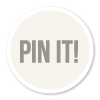
<style>
.page{position:relative;width:100px;height:100px;background:#ffffff}
.page>*{position:absolute;margin:0}
.t1{font:31.9px "BebasNeue";color:#96958e;text-transform:uppercase}
</style>
<div class="page">
<p class="t1" style="left:20px;top:40px;width:58px;height:23px">pin it!</p>
</div>
